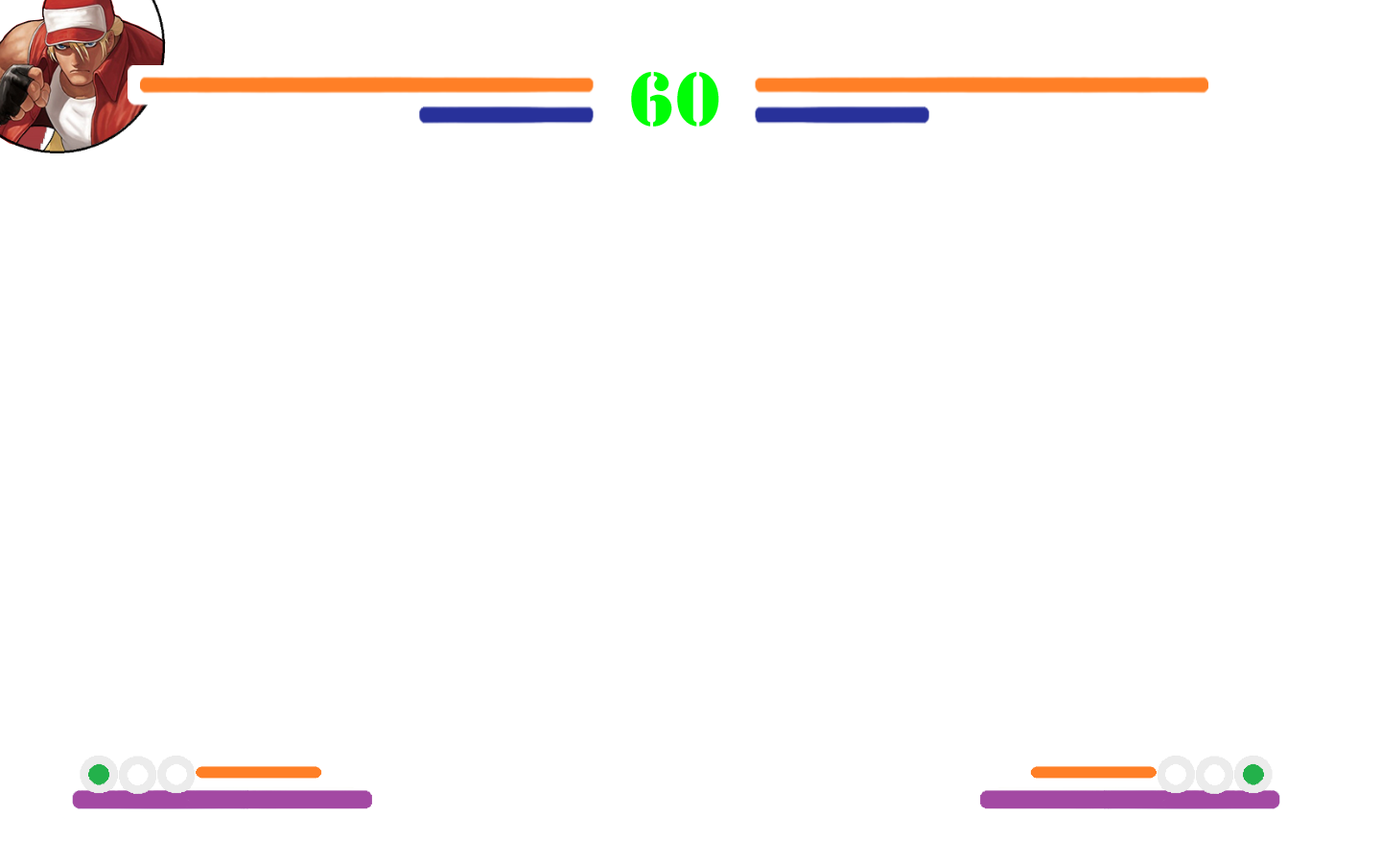
<style>
.page{position:relative;width:1381px;height:863px;background:#ffffff}
.page>*{position:absolute;margin:0}
.t1{font:79.3px "Stencil";color:#00fd06}
</style>
<div class="page">
<p class="t1" style="left:631px;top:72px;width:41px;height:55px">6</p>
<p class="t1" style="left:677px;top:72px;width:42px;height:55px">0</p>
</div>
